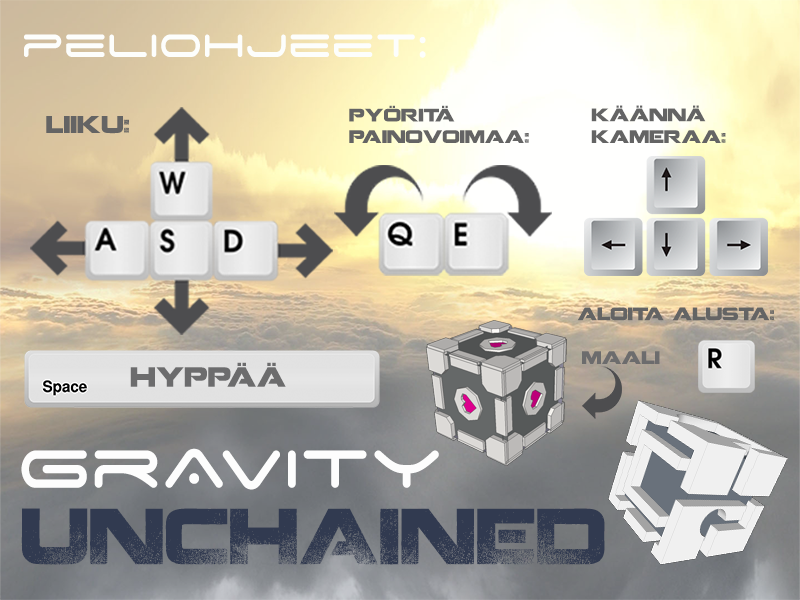
<style>
.page{position:relative;width:800px;height:600px}
.page>*{position:absolute;margin:0}
.t1{font:51.5px "SpaceAge";color:#fdfefc;scale:0.93 1}
.t2{font:18px "Coalition";color:#646464}
.t3{font:24px "Coalition";color:#646464}
.t4{font:18px "Coalition";color:#6c6c6d}
.t5{font:27.5px "Coalition";color:#6c6c6d}
.t6{font:85.4px "SpaceAge";color:#fdfdfd;scale:0.94 1}
.t7{font:78.3px "Coalition";color:#313a50;scale:0.94 1}
</style>
<div class="page">
<p class="t1" style="left:24px;top:34px;width:402px;height:24px">peliohjeet:</p>
<p class="t2" style="left:349px;top:105px;width:180px;height:38px">pyöritä<br>painovoimaa:</p>
<p class="t2" style="left:591px;top:105px;width:135px;height:38px">käännä<br>kameraa:</p>
<p class="t3" style="left:46px;top:116px;width:83px;height:18px">liiku:</p>
<p class="t2" style="left:577px;top:307px;width:197px;height:14px">aloita alusta:</p>
<p class="t4" style="left:582px;top:351px;width:78px;height:13px">maali</p>
<p class="t5" style="left:130px;top:362px;width:156px;height:25px">hyppää</p>
<p class="t6" style="left:21px;top:448px;width:418px;height:42px">grAvity</p>
<p class="t7" style="left:21px;top:508px;width:584px;height:57px">UNCHAINED</p>
</div>
